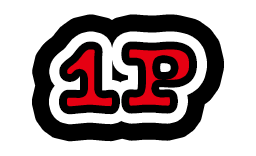
<style>
.page{position:relative;width:256px;height:156px;background:#ffffff}
.page>*{position:absolute;margin:0}
.t1{font:100px "Olivita-Regular";font-weight:bold}
</style>
<div class="page">
<p class="t1" style="left:59px;top:41px;width:138px;height:74px">1P</p>
</div>
